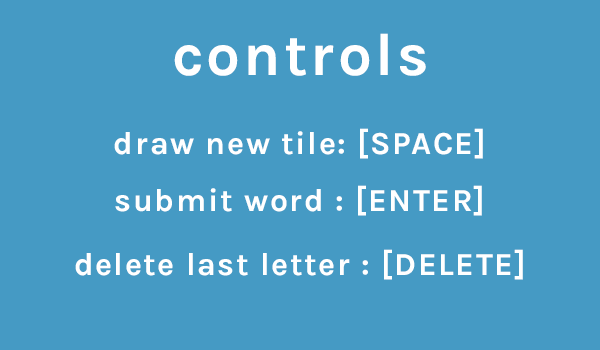
<style>
.page{position:relative;width:600px;height:350px;background:#459ac4}
.page>*{position:absolute;margin:0}
.t1{font:60px "Karla-Bold";letter-spacing:0.05em;color:#ffffff}
.t2{font:32px/480px "Karla-Bold";letter-spacing:0.05em;color:#ffffff}
</style>
<div class="page">
<p class="t1" style="left:174px;top:33px;width:252px;height:43px">controls</p>
<p class="t2" style="left:114px;top:128px;width:369px;height:31px;text-align:center">draw new tile: [SPACE]<br>subs</p>
<p class="t2" style="left:115px;top:185px;width:367px;height:31px;text-align:center">submit word : [ENTER]<br>subs</p>
<p class="t2" style="left:75px;top:249px;width:448px;height:31px;text-align:center">delete last letter : [DELETE]<br>subs</p>
</div>
